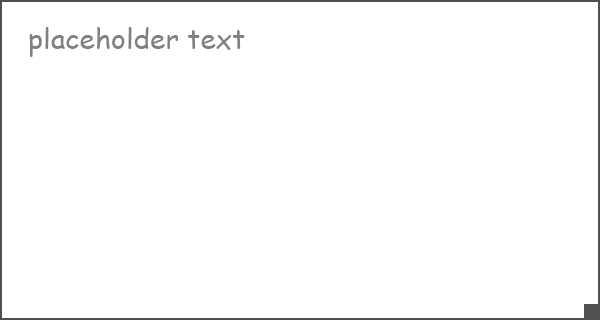
<style>
.page{position:relative;width:600px;height:320px;background:#ffffff}
.page>*{position:absolute;margin:0}
.t1{font:28px "ComicSansMS";color:#808080}
</style>
<div class="page">
<p class="t1" style="left:29px;top:27px;width:216px;height:30px">placeholder text</p>
</div>
